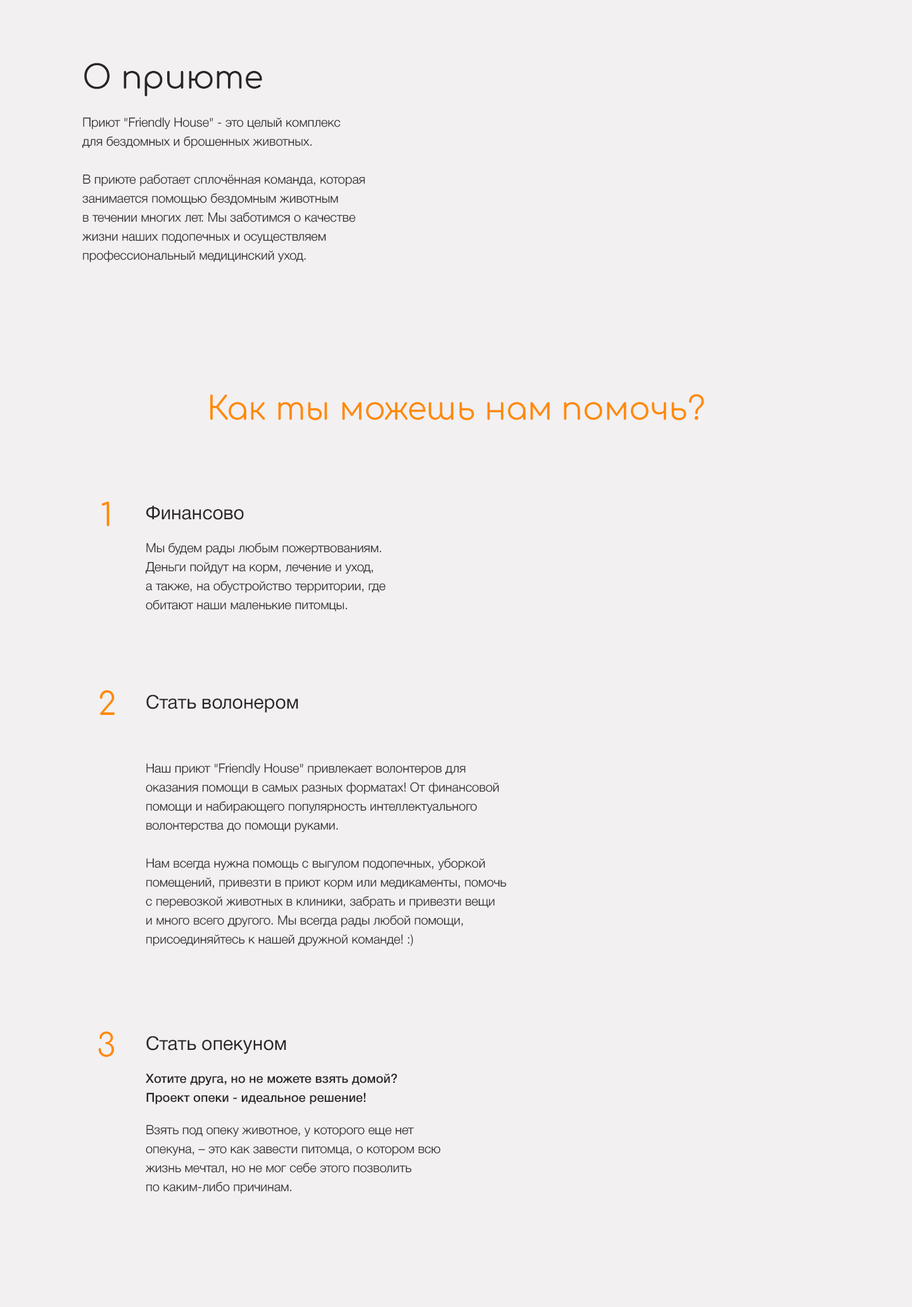
<style>
.page{position:relative;width:912px;height:1307px;background:#f2f0f1}
.page>*{position:absolute;margin:0}
.t1{font:31.7px "Comfortaa-Regular";color:#282626}
.t2{font:12.7px/19px "HelveticaNeueCyr-Light";color:#282626}
.t3{font:31.7px "Comfortaa-Regular";color:#ff8a00}
.t4{font:19px "HelveticaNeueCyr-Roman";color:#282626}
.t5{font:12.7px/19px "HelveticaNeueCyr-Medium";color:#282626}
</style>
<div class="page">
<p class="t1" style="left:84px;top:63px;width:178px;height:33px">О приюте</p>
<p class="t2" style="left:82px;top:117px;width:283px;height:146px">Приют "Friendly House" - это целый комплекс <br>для бездомных и брошенных животных. <br> <br>В приюте работает сплочённая команда, которая занимается помощью бездомным животным <br>в течении многих лет. Мы заботимся о качестве жизни наших подопечных и осуществляем профессиональный медицинский уход.</p>
<p class="t3" style="left:210px;top:394px;width:494px;height:27px">Как ты можешь нам помочь?</p>
<p class="t3" style="left:101px;top:501px;width:9px;height:25px">1</p>
<p class="t4" style="left:146px;top:505px;width:98px;height:15px">Финансово</p>
<p class="t2" style="left:146px;top:543px;width:240px;height:69px">Мы будем рады любым пожертвованиям. <br>Деньги пойдут на корм, лечение и уход, <br>а также, на обустройство территории, где обитают наши маленькие питомцы.</p>
<p class="t3" style="left:99px;top:690px;width:16px;height:25px">2</p>
<p class="t4" style="left:146px;top:695px;width:152px;height:18px">Стать волонером</p>
<p class="t2" style="left:146px;top:763px;width:361px;height:184px">Наш приют "Friendly House" привлекает волонтеров для оказания помощи в самых разных форматах! От финансовой помощи и набирающего популярность интеллектуального волонтерства до помощи руками. <br><br>Нам всегда нужна помощь с выгулом подопечных, уборкой помещений, привезти в приют корм или медикаменты, помочь с перевозкой животных в клиники, забрать и привезти вещи <br>и много всего другого. Мы всегда рады любой помощи, присоединяйтесь к нашей дружной команде! :)</p>
<p class="t3" style="left:98px;top:1032px;width:16px;height:25px">3</p>
<p class="t4" style="left:146px;top:1036px;width:140px;height:19px">Стать опекуном</p>
<p class="t5" style="left:146px;top:1074px;width:251px;height:31px">Хотите друга, но не можете взять домой? <br>Проект опеки - идеальное решение!</p>
<p class="t2" style="left:146px;top:1125px;width:295px;height:69px">Взять под опеку животное, у которого еще нет опекуна, – это как завести питомца, о котором всю жизнь мечтал, но не мог себе этого позволить <br>по каким-либо причинам.</p>
</div>
